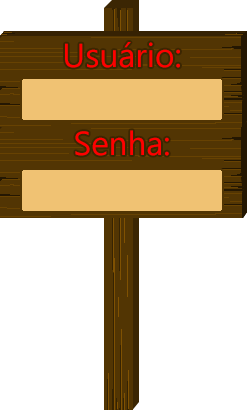
<style>
.page{position:relative;width:247px;height:410px;background:#ffffff}
.page>*{position:absolute;margin:0}
.t1{font:33.3px "MicrosoftNewTaiLue";color:#ff0000}
</style>
<div class="page">
<p class="t1" style="left:65px;top:42px;width:115px;height:26px">Usuário:</p>
<p class="t1" style="left:75px;top:130px;width:94px;height:26px">Senha:</p>
</div>
